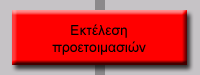
<style>
.page{position:relative;width:200px;height:75px;background:#ff0000}
.page>*{position:absolute;margin:0}
.t1{font:14px "ArialMT";color:#000000}
</style>
<div class="page">
<p class="t1" style="left:52px;top:24px;width:94px;height:31px;text-align:center">Εκτέλεση<br>προετοιμασιών</p>
</div>
